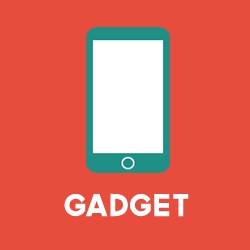
<style>
.page{position:relative;width:250px;height:250px;background:#e74c3c}
.page>*{position:absolute;margin:0}
.t1{font:30px "Governor";color:#ffffff}
</style>
<div class="page">
<p class="t1" style="left:64px;top:193px;width:125px;height:24px">GADGET</p>
</div>
